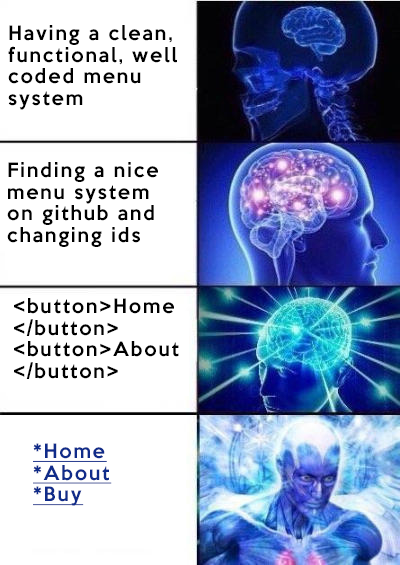
<style>
.page{position:relative;width:400px;height:565px;background:#ffffff}
.page>*{position:absolute;margin:0}
.t1{font:18px "KeepCalm-Medium";letter-spacing:0.1em;color:#000000}
.t2{font:18px "KeepCalm-Medium";letter-spacing:0.1em;color:#102c8a;text-decoration:underline}
</style>
<div class="page">
<p class="t1" style="left:8px;top:25px;width:169px;height:85px">Having a clean,<br>functional, well<br>coded menu<br>system</p>
<p class="t1" style="left:7px;top:162px;width:151px;height:85px">Finding a nice<br>menu system<br>on github and<br>changing ids</p>
<p class="t1" style="left:14px;top:298px;width:165px;height:81px">&lt;button&gt;Home<br>&lt;/button&gt;<br>&lt;button&gt;About<br>&lt;/button&gt;</p>
<p class="t2" style="left:33px;top:443px;width:79px;height:63px">*Home<br>*About<br>*Buy</p>
</div>
